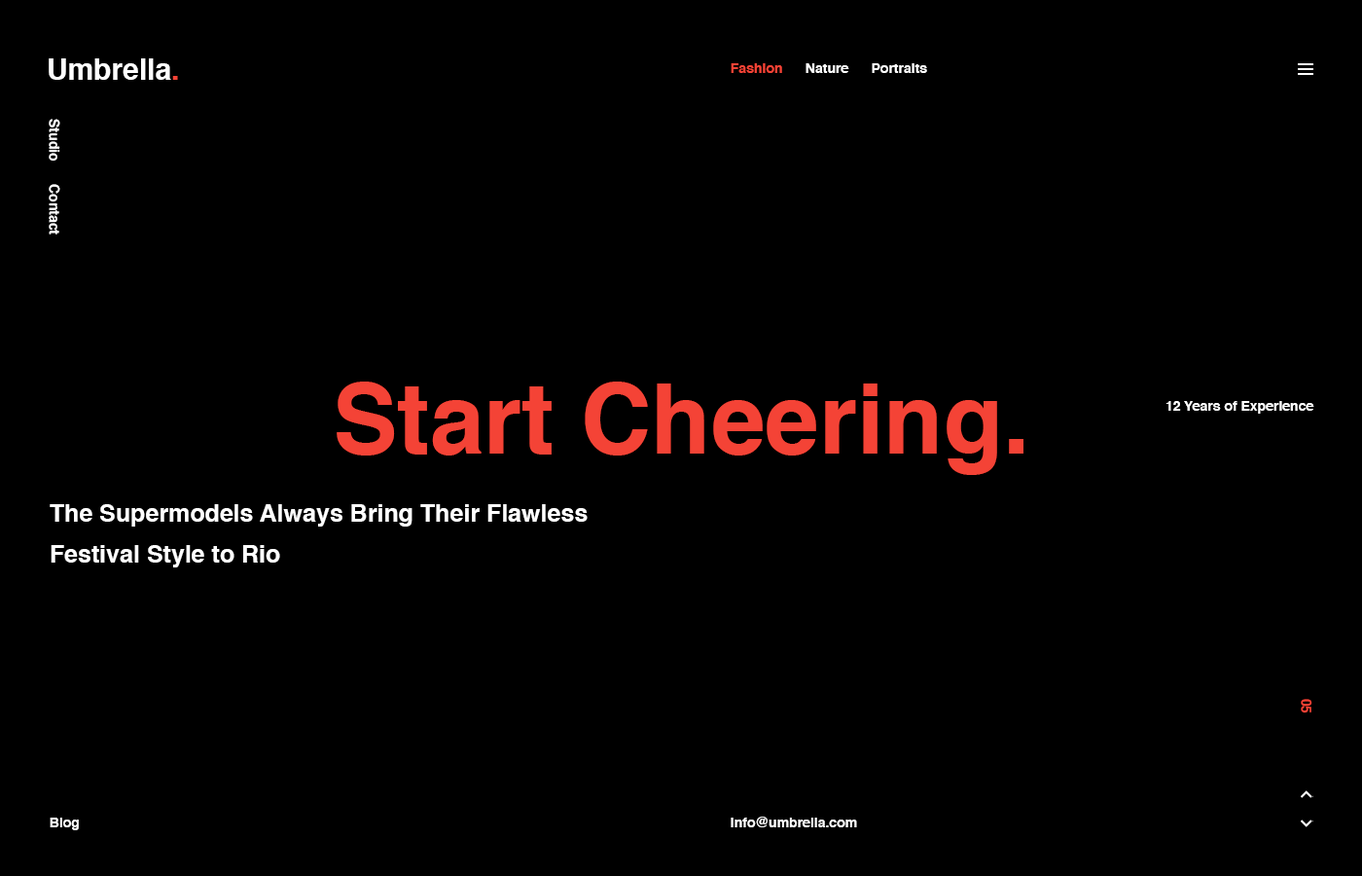
<style>
.page{position:relative;width:1362px;height:876px;background:#000000}
.page>*{position:absolute;margin:0}
.t1{font:29.2px "Helvetica-Bold";color:#ffffff}
.t2{font:29.2px "Helvetica-Bold";color:#f44336}
.t3{font:13.6px "Helvetica-Bold";color:#ffffff}
.t4{font:13.6px "Helvetica-Bold";color:#f44336}
.t5{font:97.3px "Helvetica-Bold";color:#f44336}
.t6{font:24.3px/40.9px "Helvetica-Bold";color:#ffffff}
</style>
<div class="page">
<p class="t1" style="left:49px;top:58px;width:129px;height:22px">Umbrella<span class="t2">.</span></p>
<p class="t3" style="left:731px;top:63px;width:196px;height:10px"><span class="t4">Fashion</span>      Nature      Portraits</p>
<p class="t3" style="left:49px;top:119px;width:11px;height:115px;rotate:90deg">Studio      Contact</p>
<p class="t5" style="left:337px;top:381px;width:686px;height:94px">Start Cheering.</p>
<p class="t3" style="left:1165px;top:401px;width:149px;height:12px">12 Years of Experience</p>
<p class="t6" style="left:50px;top:504px;width:538px;height:63px">The Supermodels Always Bring Their Flawless Festival Style to Rio</p>
<p class="t4" style="left:1301px;top:698px;width:11px;height:15px;rotate:90deg">05</p>
<p class="t3" style="left:50px;top:817px;width:29px;height:13px">Blog</p>
<p class="t3" style="left:731px;top:816px;width:126px;height:11px">info@umbrella.com</p>
</div>
